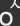
<style>
.page{position:relative;width:20px;height:26px;background:#333333}
.page>*{position:absolute;margin:0}
.t1{font:12px "DFKaiShu-SB-Estd-BF";color:#ececec;font-weight:bold}
.t2{font:18px "ArialMT";color:#ececec;font-weight:bold}
</style>
<div class="page">
<p class="t1" style="left:10px;top:0px;width:12px;height:9px">人</p>
<p class="t2" style="left:0px;top:11px;width:13px;height:15px">O</p>
</div>
